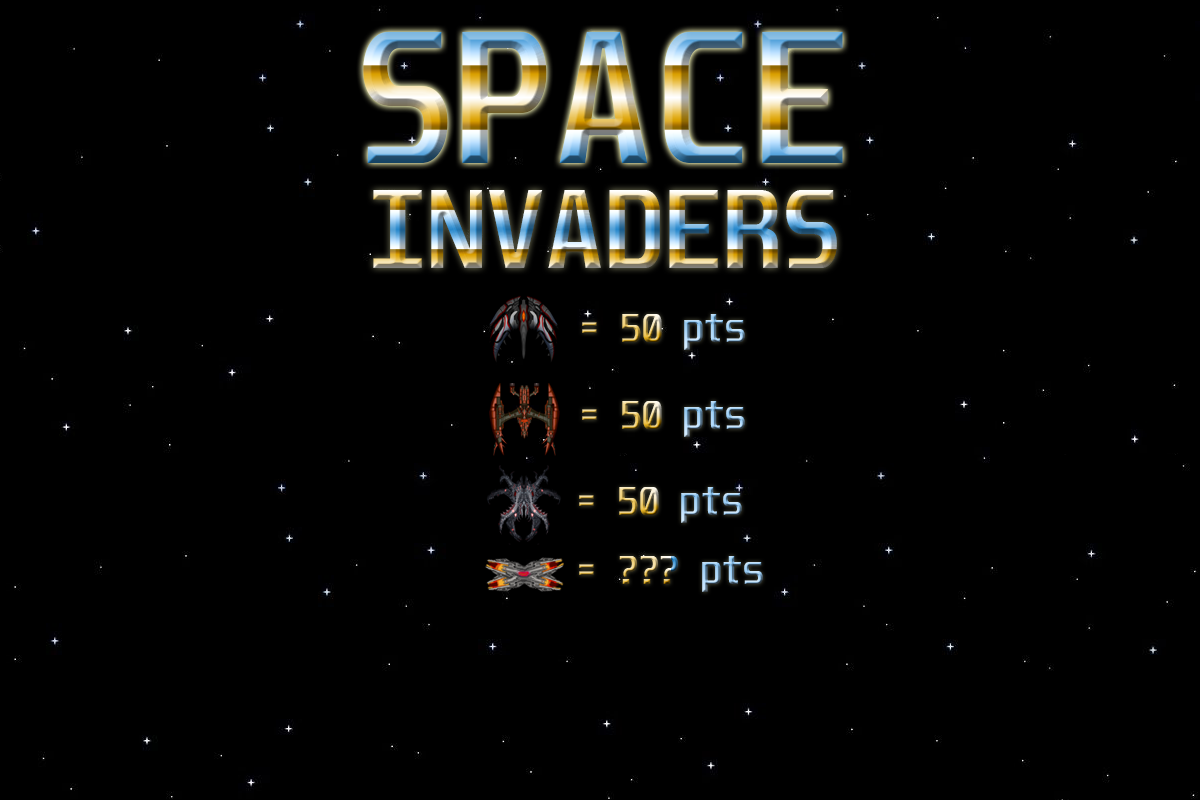
<style>
.page{position:relative;width:1200px;height:800px;background:#000000}
.page>*{position:absolute;margin:0}
.t1{font:162.2px "Unispace-Bold"}
.t2{font:96.8px "Unispace-Bold"}
.t3{font:34px "Unispace-Bold"}
</style>
<div class="page">
<p class="t1" style="left:363px;top:31px;width:480px;height:132px">SPACE</p>
<p class="t2" style="left:373px;top:190px;width:464px;height:78px">INVADERS</p>
<p class="t3" style="left:582px;top:314px;width:163px;height:36px">= 50 pts</p>
<p class="t3" style="left:582px;top:401px;width:163px;height:36px">= 50 pts</p>
<p class="t3" style="left:579px;top:487px;width:163px;height:36px">= 50 pts</p>
<p class="t3" style="left:579px;top:556px;width:184px;height:36px">= ??? pts</p>
</div>
